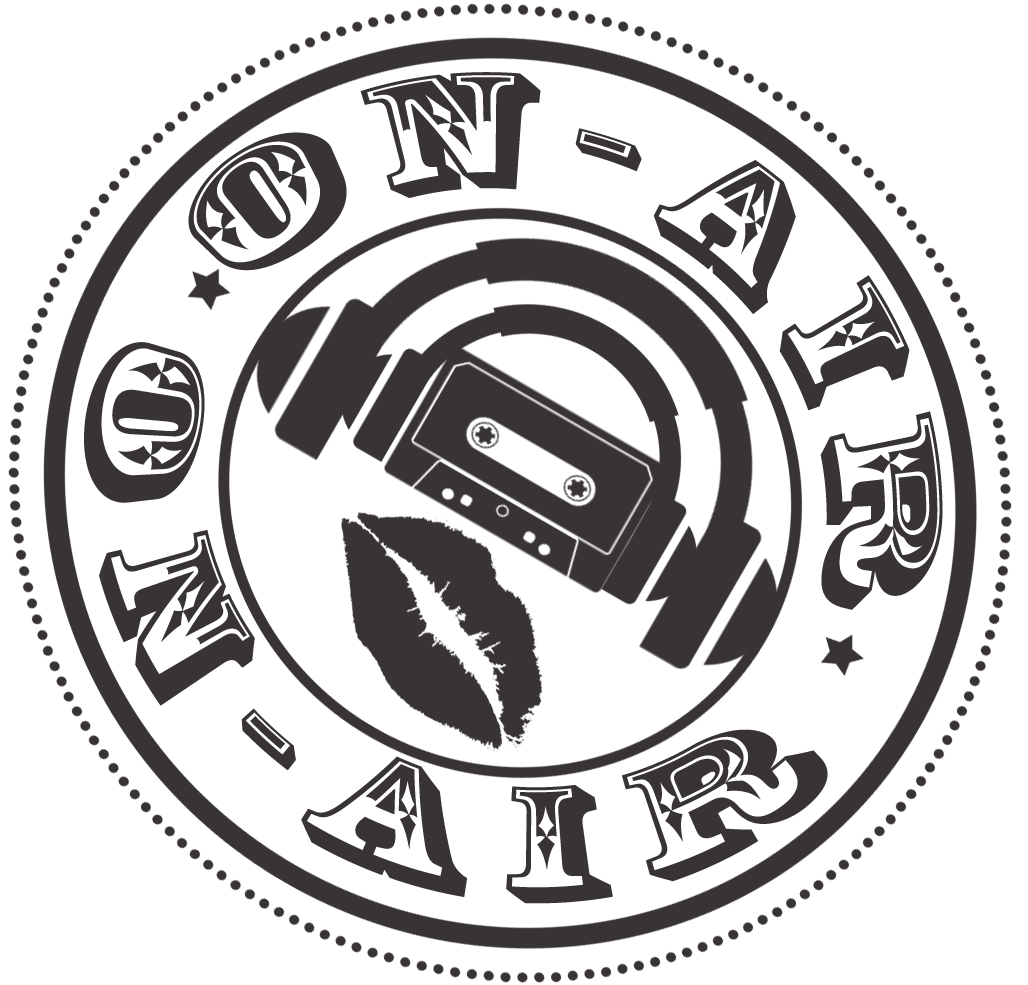
<style>
.page{position:relative;width:1028px;height:985px;background:#ffffff}
.page>*{position:absolute;margin:0}
.t1{font:153px "RosewoodStd-Regular";letter-spacing:0.14em;color:#383433}
</style>
<div class="page">
<p class="t1" style="left:188px;top:72px;width:755px;height:538px;rotate:30deg">On-Air</p>
<p class="t1" style="left:84px;top:342px;width:744px;height:562px;rotate:30deg">On-Air</p>
</div>
